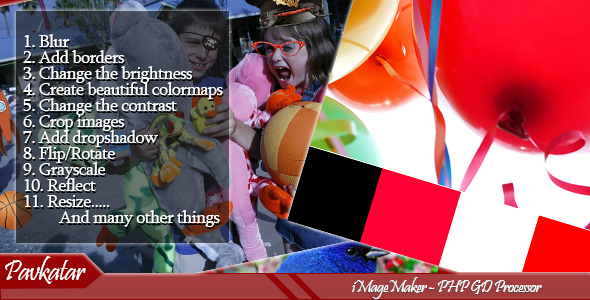
<style>
.page{position:relative;width:590px;height:300px}
.page>*{position:absolute;margin:0}
.t1{font:18px/16px "Sylfaen";letter-spacing:-0.04em;color:#ffffff}
.t2{font:30px "Pristina-Regular";letter-spacing:-0.04em;color:#ffffff}
.t3{font:18px "Pristina-Regular";letter-spacing:-0.04em}
.t4{font:18px "Pristina-Regular";letter-spacing:-0.04em;color:#ffffff}
</style>
<div class="page">
<p class="t1" style="left:23px;top:34px;width:200px;height:193px">1. Blur<br>2. Add borders<br>3. Change the brightness<br>4. Create beautiful colormaps<br>5. Change the contrast<br>6. Crop images<br>7. Add dropshadow<br>8. Flip/Rotate<br>9. Grayscale <br>10. Reflect <br>11. Resize.....<br> And many other things</p>
<p class="t2" style="left:5px;top:256px;width:81px;height:28px">Pavkatar</p>
<p class="t3" style="left:351px;top:278px;width:190px;height:22px">iMageMaker - PHP GD Processor</p>
<p class="t4" style="left:352px;top:277px;width:190px;height:22px">iMageMaker - PHP GD Processor</p>
</div>
